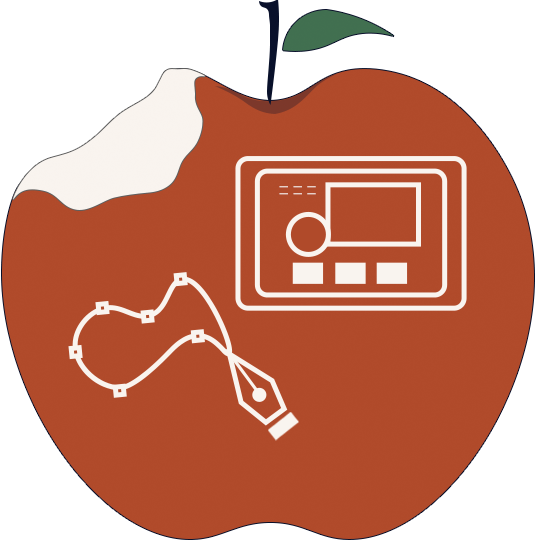
<style>
.page{position:relative;width:535px;height:540px;background:#b04a2a}
.page>*{position:absolute;margin:0}
.t1{font:16.1px/6.9px "VDL-V7Mincho-Bold";letter-spacing:-0.025em;font-weight:bold}
</style>
<div class="page">
<p class="t1" style="left:279px;top:186px;width:37px;height:9px">_ _ _<br>_ _ _</p>
</div>
